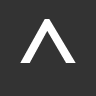
<style>
.page{position:relative;width:96px;height:96px;background:#333333}
.page>*{position:absolute;margin:0}
.t1{font:99px "MicrosoftYaHei";color:#ffffff;scale:1.1 1}
</style>
<div class="page">
<p class="t1" style="left:20px;top:19px;width:56px;height:44px">^</p>
</div>
